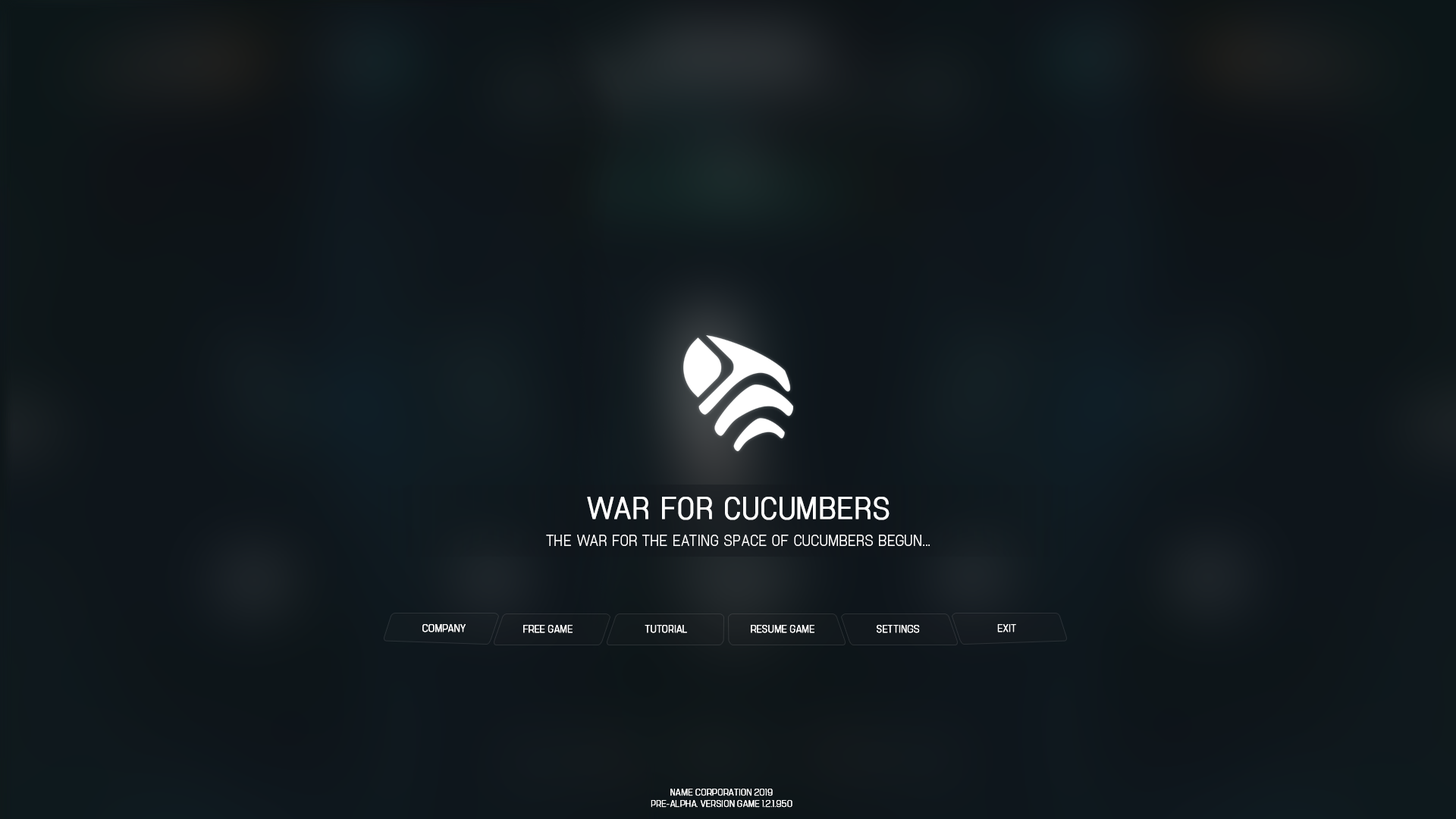
<style>
.page{position:relative;width:1456px;height:819px}
.page>*{position:absolute;margin:0}
.t1{font:30.3px "ManifoldCF-Regular";color:#ffffff;text-transform:uppercase;font-weight:bold}
.t2{font:15.2px "ManifoldCF-Regular";color:#ffffff;text-transform:uppercase}
.t3{font:10px "ManifoldCF-Light";color:#ffffff;text-transform:uppercase;font-weight:bold}
.t4{font:9.1px/11.4px "ManifoldCF-Light";color:#ffffff;text-transform:uppercase;font-weight:bold}
</style>
<div class="page">
<p class="t1" style="left:587px;top:497px;width:303px;height:23px">war for cucumbers</p>
<p class="t2" style="left:546px;top:535px;width:384px;height:11px">The war for the eating space of cucumbers begun...</p>
<p class="t3" style="left:422px;top:624px;width:44px;height:8px">company</p>
<p class="t3" style="left:523px;top:625px;width:50px;height:8px">free game</p>
<p class="t3" style="left:645px;top:625px;width:42px;height:8px">tutorial</p>
<p class="t3" style="left:751px;top:625px;width:63px;height:8px">resume game</p>
<p class="t3" style="left:877px;top:625px;width:43px;height:8px">settings</p>
<p class="t3" style="left:997px;top:624px;width:19px;height:8px">exit</p>
<p class="t4" style="left:651px;top:789px;width:141px;height:19px;text-align:center">name corporation 2019<br>pre-alpha. version game 1.2.1.950</p>
</div>
